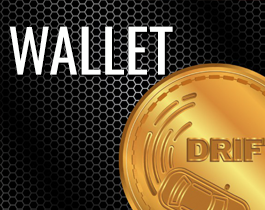
<style>
.page{position:relative;width:265px;height:210px;background:#000000}
.page>*{position:absolute;margin:0}
.t1{font:59px "Oswald-Regular";color:#fefffe;font-weight:bold}
</style>
<div class="page">
<p class="t1" style="left:9px;top:26px;width:164px;height:49px">WALLET</p>
</div>
